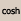
<style>
.page{position:relative;width:21px;height:21px;background:#d9cdc1}
.page>*{position:absolute;margin:0}
.t1{font:9px "Tahoma";color:#000000}
</style>
<div class="page">
<p class="t1" style="left:2px;top:7px;width:18px;height:8px">cosh</p>
</div>
